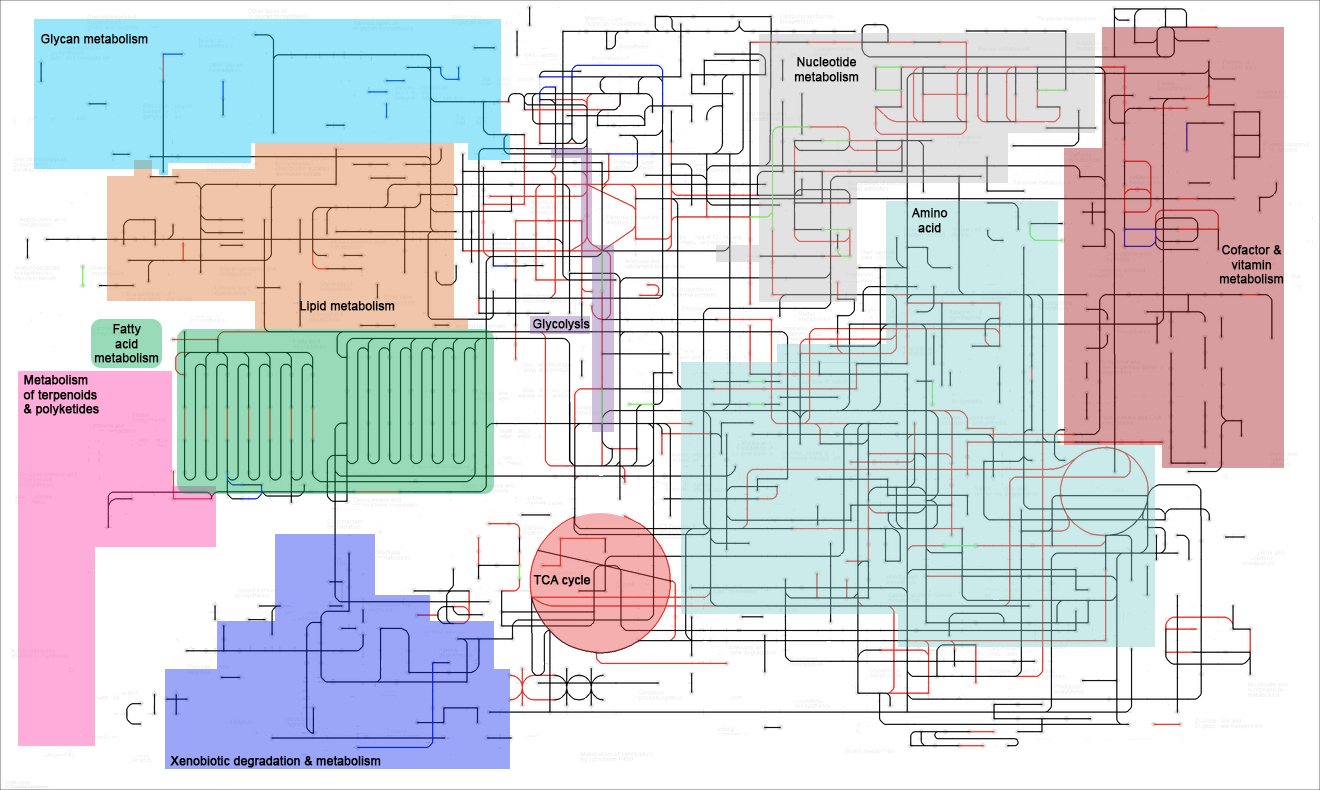
<style>
.page{position:relative;width:1320px;height:790px;background:#ffffff}
.page>*{position:absolute;margin:0}
.t1{font:12px "ArialMT";color:#000000;font-weight:bold}
</style>
<div class="page">
<p class="t1" style="left:41px;top:34px;width:107px;height:12px">Glycan metabolism</p>
<p class="t1" style="left:794px;top:57px;width:65px;height:25px;text-align:center">Nucleotide<br>metabolism</p>
<p class="t1" style="left:911px;top:208px;width:37px;height:25px;text-align:center">Amino<br>acid</p>
<p class="t1" style="left:1219px;top:245px;width:65px;height:39px;text-align:center">Cofactor &amp;<br>vitamin<br>metabolism</p>
<p class="t1" style="left:300px;top:301px;width:95px;height:12px">Lipid metabolism</p>
<p class="t1" style="left:94px;top:324px;width:65px;height:39px;text-align:center">Fatty<br>acid<br>metabolism</p>
<p class="t1" style="left:533px;top:319px;width:57px;height:12px">Glycolysis</p>
<p class="t1" style="left:23px;top:375px;width:76px;height:41px">Metabolism<br>of terpenoids<br>&amp; polyketides</p>
<p class="t1" style="left:533px;top:575px;width:58px;height:12px">TCA cycle</p>
<p class="t1" style="left:170px;top:756px;width:211px;height:12px">Xenobiotic degradation &amp; metabolism</p>
</div>
